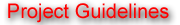
<style>
.page{position:relative;width:180px;height:25px}
.page>*{position:absolute;margin:0}
.t1{font:20px "ArialMT";color:#ff0000}
</style>
<div class="page">
<p class="t1" style="left:8px;top:3px;width:161px;height:20px">Project Guidelines</p>
</div>
